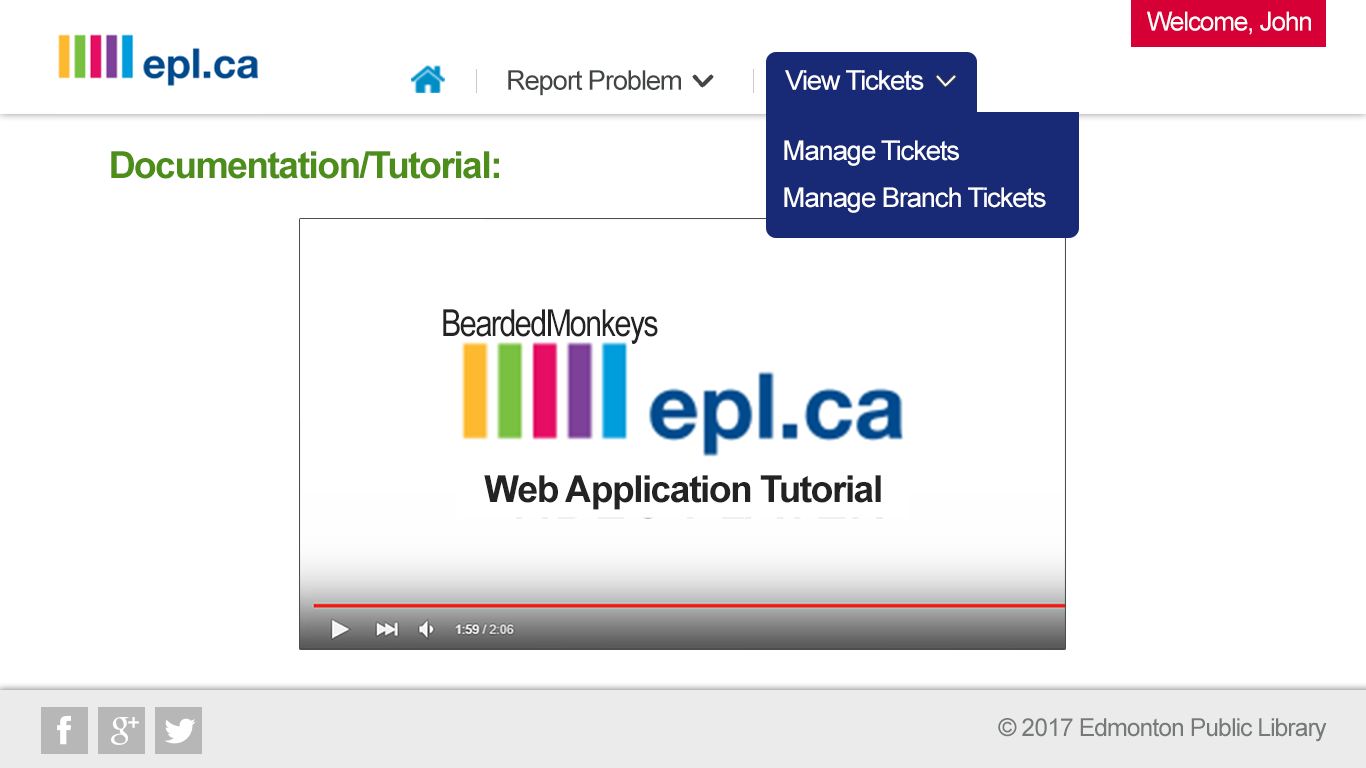
<style>
.page{position:relative;width:1366px;height:768px;background:#ffffff}
.page>*{position:absolute;margin:0}
.t1{font:26px "ArialMT";letter-spacing:-0.04em;color:#ffffff}
.t2{font:27.3px "ArialMT";letter-spacing:-0.04em;color:#414546}
.t3{font:27.3px "ArialMT";letter-spacing:-0.04em;color:#ffffff}
.t4{font:37.2px "Arial-BoldMT";letter-spacing:-0.04em;color:#4d8d1a}
.t5{font:37.2px "ArialNarrow";letter-spacing:-0.04em;color:#232323}
.t6{font:37.2px "Arial-BoldMT";letter-spacing:-0.04em;color:#232323}
.t7{font:24.8px "ArialMT";letter-spacing:-0.04em;color:#767979}
</style>
<div class="page">
<p class="t1" style="left:1147px;top:11px;width:164px;height:24px">Welcome, John</p>
<p class="t2" style="left:508px;top:70px;width:173px;height:26px">Report Problem</p>
<p class="t3" style="left:785px;top:70px;width:139px;height:20px">View Tickets</p>
<p class="t3" style="left:784px;top:140px;width:175px;height:26px">Manage Tickets</p>
<p class="t4" style="left:111px;top:151px;width:388px;height:28px">Documentation/Tutorial:</p>
<p class="t3" style="left:784px;top:187px;width:262px;height:26px">Manage Branch Tickets</p>
<p class="t5" style="left:443px;top:309px;width:215px;height:35px">BeardedMonkeys</p>
<p class="t6" style="left:484px;top:475px;width:397px;height:35px">Web Application Tutorial</p>
<p class="t7" style="left:998px;top:718px;width:329px;height:24px">© 2017 Edmonton Public Library</p>
</div>
